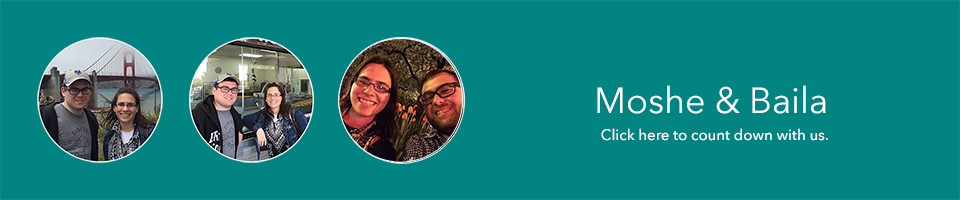
<style>
.page{position:relative;width:960px;height:200px;background:#028482}
.page>*{position:absolute;margin:0}
.t1{font:36px "AvenirNext-Regular";color:#ffffff}
.t2{font:15px "AvenirNext-Medium";color:#ffffff}
</style>
<div class="page">
<p class="t1" style="left:597px;top:85px;width:229px;height:29px">Moshe &amp; Baila</p>
<p class="t2" style="left:601px;top:128px;width:227px;height:13px">Click here to count down with us.</p>
</div>
